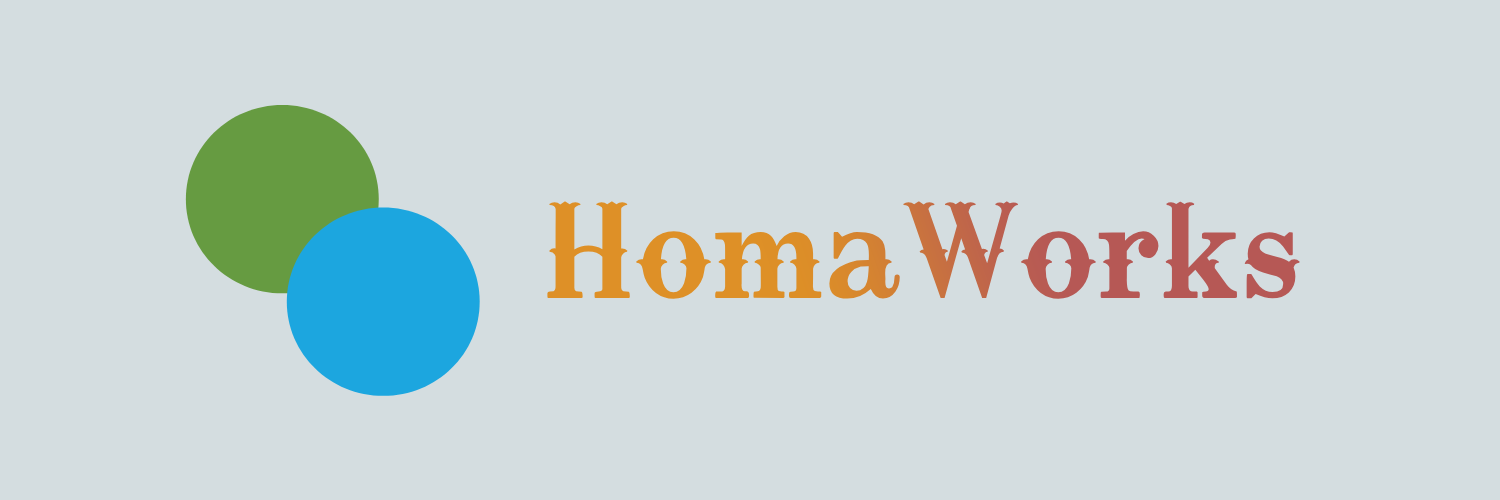
<style>
.page{position:relative;width:1500px;height:500px;background:#d4dde0}
.page>*{position:absolute;margin:0}
.t1{font:118.2px "Oklahoma"}
</style>
<div class="page">
<p class="t1" style="left:547px;top:201px;width:753px;height:98px">HomaWorks</p>
</div>
